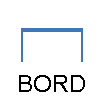
<style>
.page{position:relative;width:100px;height:100px;background:#ffffff}
.page>*{position:absolute;margin:0}
.t1{font:24px "ArialMT";color:#000000}
</style>
<div class="page">
<p class="t1" style="left:19px;top:75px;width:66px;height:17px">BORD</p>
</div>
